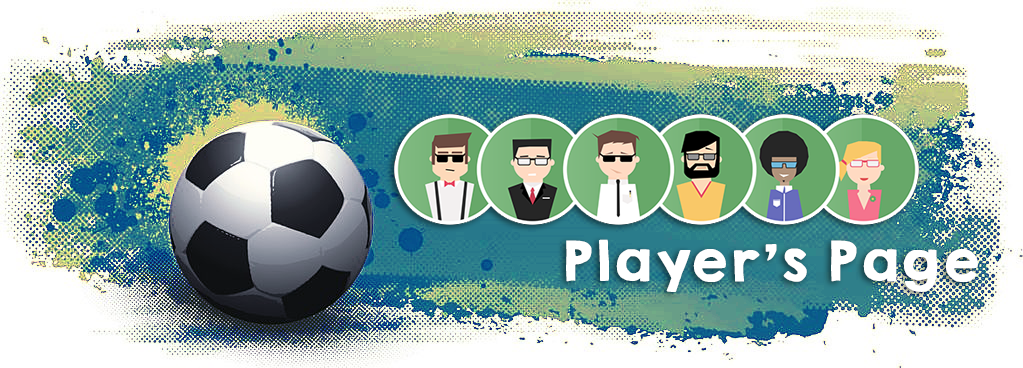
<style>
.page{position:relative;width:1023px;height:368px}
.page>*{position:absolute;margin:0}
.t1{font:50px "KGHAPPYSolid";color:#ffffff}
</style>
<div class="page">
<p class="t1" style="left:566px;top:239px;width:412px;height:53px">Player’s Page</p>
</div>
